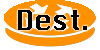
<style>
.page{position:relative;width:100px;height:50px;background:#ffffff}
.page>*{position:absolute;margin:0}
.t1{font:26.7px "Silom";color:#000000}
</style>
<div class="page">
<p class="t1" style="left:18px;top:10px;width:69px;height:20px">Dest.</p>
</div>
